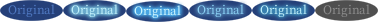
<style>
.page{position:relative;width:378px;height:22px}
.page>*{position:absolute;margin:0}
.t1{font:14px "OfficialFateFont-Medium";color:#507ac3}
.t2{font:14px "OfficialFateFont-Medium";color:#c1f1fc}
.t3{font:14px "OfficialFateFont-Medium";color:#cff7fe}
.t4{font:14px "OfficialFateFont-Medium";color:#8cd2f6}
.t5{font:14px "OfficialFateFont-Medium";color:#8d8d8d}
</style>
<div class="page">
<p class="t1" style="left:8px;top:4px;width:47px;height:14px">Original</p>
<p class="t2" style="left:71px;top:4px;width:47px;height:14px">Original</p>
<p class="t3" style="left:134px;top:5px;width:47px;height:14px">Original</p>
<p class="t4" style="left:197px;top:4px;width:47px;height:14px">Original</p>
<p class="t2" style="left:260px;top:4px;width:47px;height:14px">Original</p>
<p class="t5" style="left:323px;top:4px;width:47px;height:14px">Original</p>
</div>
